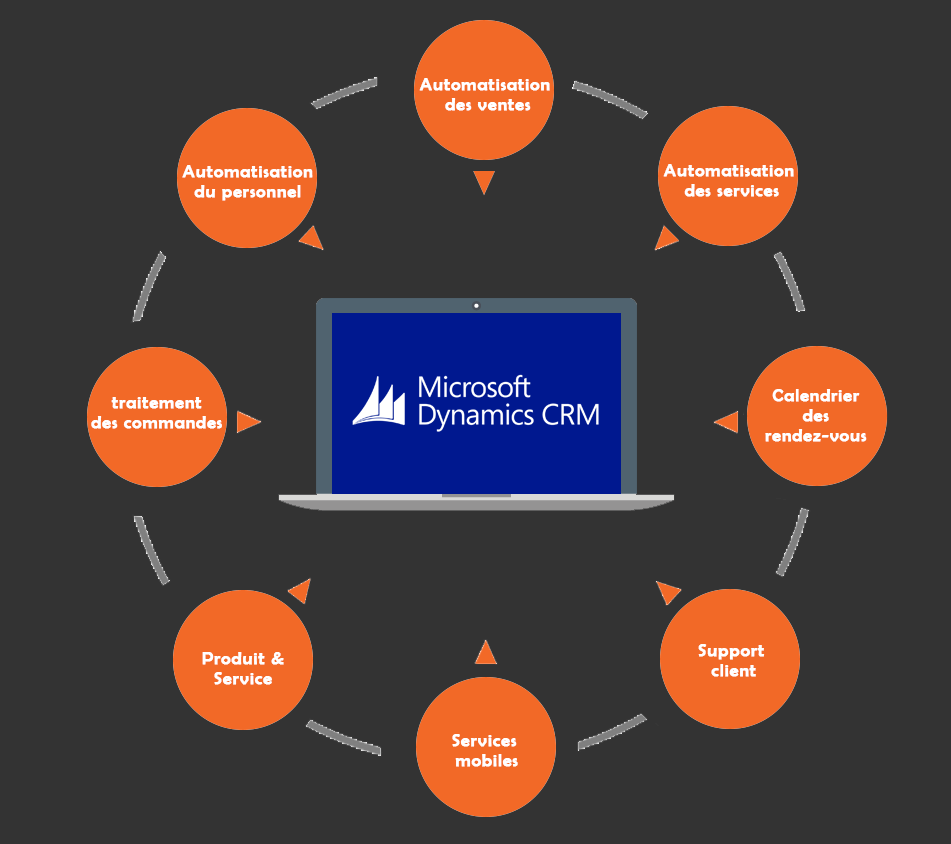
<style>
.page{position:relative;width:951px;height:844px;background:#333333}
.page>*{position:absolute;margin:0}
.t1{font:18px/20px "BerlinSansFB-Reg";letter-spacing:0.03em;color:#ffffff;font-weight:bold}
</style>
<div class="page">
<p class="t1" style="left:419px;top:78px;width:131px;height:33px;text-align:center">Automatisation <br>des ventes</p>
<p class="t1" style="left:182px;top:165px;width:131px;height:36px;text-align:center">Automatisation<br>du personnel</p>
<p class="t1" style="left:663px;top:164px;width:131px;height:33px;text-align:center">Automatisation <br>des services</p>
<p class="t1" style="left:765px;top:389px;width:102px;height:53px;text-align:center">Calendrier<br>des<br>rendez-vous</p>
<p class="t1" style="left:91px;top:397px;width:131px;height:32px;text-align:center">traitement<br>des commandes</p>
<p class="t1" style="left:202px;top:652px;width:82px;height:33px;text-align:center">Produit &amp;<br>Service</p>
<p class="t1" style="left:698px;top:644px;width:67px;height:33px;text-align:center">Support <br>client</p>
<p class="t1" style="left:452px;top:734px;width:66px;height:33px;text-align:center">Services <br>mobiles</p>
</div>
